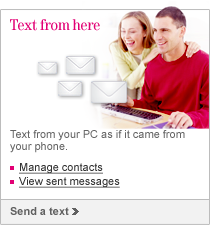
<style>
.page{position:relative;width:210px;height:225px;background:#ffffff}
.page>*{position:absolute;margin:0}
.t1{font:16px "Tele-Antiqua";color:#e20074}
.t2{font:11px/12px "ArialMT";color:#666666}
.t3{font:11px/14px "ArialMT";color:#333333;text-decoration:underline}
.t4{font:11px "Arial-BoldMT";color:#606060}
</style>
<div class="page">
<p class="t1" style="left:10px;top:19px;width:90px;height:12px">Text from here</p>
<p class="t2" style="left:10px;top:130px;width:175px;height:23px">Text from your PC as if it came from your phone.</p>
<p class="t3" style="left:19px;top:163px;width:101px;height:25px">Manage contacts<br>View sent messages</p>
<p class="t4" style="left:10px;top:207px;width:59px;height:8px">Send a text</p>
</div>
